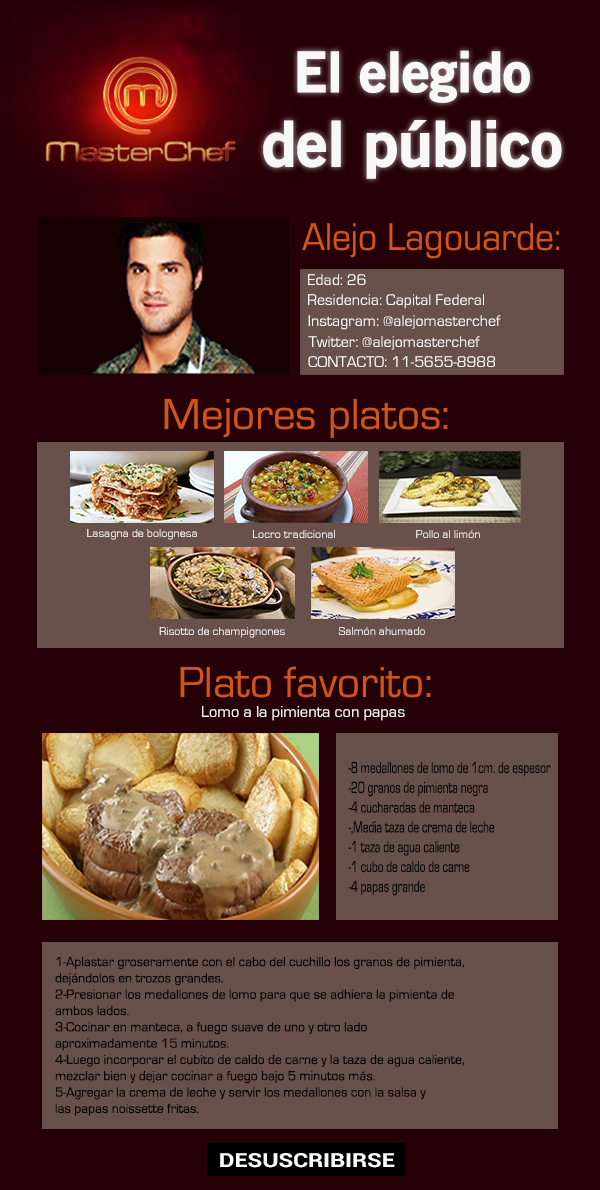
<style>
.page{position:relative;width:600px;height:1190px;background:#250007}
.page>*{position:absolute;margin:0}
.t1{font:62px "OldSansBlack";color:#ffffff}
.t2{font:55px "OldSansBlack";color:#ffffff}
.t3{font:40px "EurostileRegular";color:#d3541b;scale:0.94 1}
.t4{font:16px "EurostileRegular";color:#ffffff}
.t5{font:45px "EurostileRegular";color:#d3541b}
.t6{font:12px "EurostileRegular";color:#ffffff}
.t7{font:16.5px "EurostileRegular";color:#ffffff}
.t8{font:16.5px "EurostileRegular";color:#000000;scale:0.69 1}
.t9{font:13.6px "EurostileRegular";color:#000000}
</style>
<div class="page">
<p class="t1" style="left:263px;top:50px;width:299px;height:129px;text-align:center;opacity:0.96"><span class="t2"> El elegido <br></span>del público</p>
<p class="t3" style="left:302px;top:223px;width:257px;height:36px">Alejo Lagouarde:</p>
<p class="t4" style="left:308px;top:274px;width:58px;height:11px">Edad: 26</p>
<p class="t4" style="left:308px;top:294px;width:176px;height:15px">Residencia: Capital Federal</p>
<p class="t4" style="left:308px;top:315px;width:193px;height:15px">Instagram: @alejomasterchef</p>
<p class="t4" style="left:308px;top:336px;width:172px;height:14px">Twitter: @alejomasterchef</p>
<p class="t4" style="left:308px;top:356px;width:187px;height:11px">CONTACTO: 11-5655-8988</p>
<p class="t5" style="left:164px;top:399px;width:284px;height:39px">Mejores platos:</p>
<p class="t6" style="left:87px;top:529px;width:110px;height:11px">Lasagna de bolognesa</p>
<p class="t6" style="left:253px;top:530px;width:82px;height:8px">Locro tradicional</p>
<p class="t6" style="left:416px;top:530px;width:64px;height:8px">Pollo al limón</p>
<p class="t6" style="left:159px;top:627px;width:126px;height:11px">Risotto de champignones</p>
<p class="t6" style="left:338px;top:627px;width:87px;height:8px">Salmón ahumado</p>
<p class="t5" style="left:180px;top:666px;width:251px;height:32px">Plato favorito:</p>
<p class="t7" style="left:202px;top:706px;width:203px;height:15px">Lomo a la pimienta con papas</p>
<p class="t8" style="left:348px;top:761px;width:203px;height:135px">-8 medallones de lomo de 1cm. de espesor<br>-20 granos de pimienta negra<br>-4 cucharadas de manteca<br>-,Media taza de crema de leche<br>-1 taza de agua caliente<br>-1 cubo de caldo de carne<br>-4 papas grande</p>
<p class="t9" style="left:55px;top:957px;width:409px;height:159px">1-Aplastar groseramente con el cabo del cuchillo los granos de pimienta, <br>dejándolos en trozos grandes.<br>2-Presionar los medallones de lomo para que se adhiera la pimienta de <br>ambos lados.<br>3-Cocinar en manteca, a fuego suave de uno y otro lado <br>aproximadamente 15 minutos.<br>4-Luego incorporar el cubito de caldo de carne y la taza de agua caliente, <br>mezclar bien y dejar cocinar a fuego bajo 5 minutos más.<br>5-Agregar la crema de leche y servir los medallones con la salsa y <br>las papas noissette fritas.</p>
</div>
